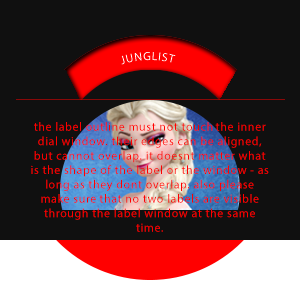
<style>
.page{position:relative;width:300px;height:300px;background:#101010}
.page>*{position:absolute;margin:0}
.t1{font:12px "MyriadPro-Regular";letter-spacing:0.05em;color:#ffffff}
.t2{font:12px "MyriadPro-Regular";letter-spacing:0.05em;color:#ff0000}
</style>
<div class="page">
<p class="t1" style="left:121px;top:52px;width:55px;height:13px">JUNGLIST</p>
<p class="t2" style="left:31px;top:122px;width:238px;height:110px;text-align:center">the label outline must not touch the inner dial window. their edges can be aligned, but cannot overlap. it doesnt matter what is the shape of the label or the window - as long as they dont overlap. also please make sure that no two labels are visible through the label window at the same time.</p>
</div>
